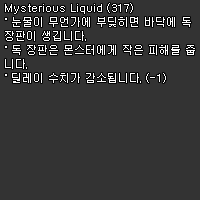
<style>
.page{position:relative;width:200px;height:200px;background:#333333}
.page>*{position:absolute;margin:0}
.t1{font:11px/14px "Dotum";color:#ffffff}
</style>
<div class="page">
<p class="t1" style="left:5px;top:3px;width:190px;height:80px">Mysterious Liquid (317)<br>˚ 눈물이 무언가에 부딪히면 바닥에 독<br>장판이 생깁니다.<br>˚ 독 장판은 몬스터에게 작은 피해를 줍<br>니다.<br>˚ 딜레이 수치가 감소됩니다. (-1)</p>
</div>
